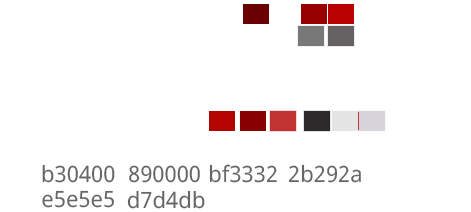
<style>
.page{position:relative;width:471px;height:212px;background:#ffffff}
.page>*{position:absolute;margin:0}
.t1{font:22.5px "NotoSans";color:#666666}
</style>
<div class="page">
<p class="t1" style="left:42px;top:164px;width:73px;height:19px">b30400</p>
<p class="t1" style="left:129px;top:165px;width:71px;height:18px">890000</p>
<p class="t1" style="left:209px;top:164px;width:68px;height:19px">bf3332</p>
<p class="t1" style="left:288px;top:164px;width:73px;height:19px">2b292a</p>
<p class="t1" style="left:42px;top:190px;width:72px;height:18px">e5e5e5</p>
<p class="t1" style="left:127px;top:190px;width:78px;height:19px">d7d4db</p>
</div>
